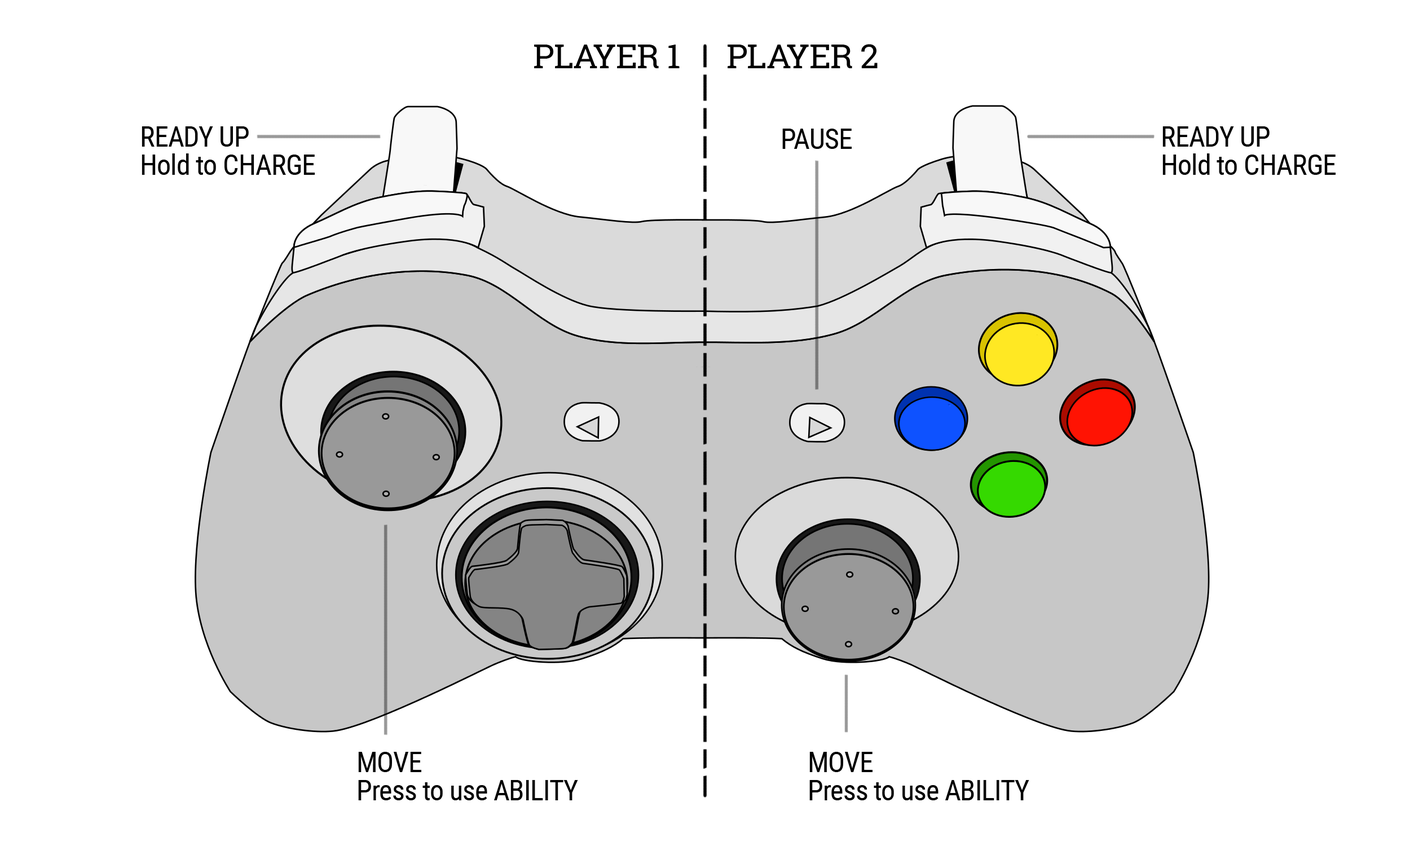
<style>
.page{position:relative;width:1410px;height:846px;background:#ffffff}
.page>*{position:absolute;margin:0}
.t1{font:33.8px "RobotoSlab-Regular";letter-spacing:-0.02em;color:#000000}
.t2{font:28px/28.7px "RobotoCondensed-Regular";letter-spacing:-0.02em;color:#000000}
.t3{font:28.2px "RobotoCondensed-Regular";letter-spacing:-0.02em;color:#000000}
</style>
<div class="page">
<p class="t1" style="left:534px;top:44px;width:343px;height:24px">PLAYER 1      PLAYER 2</p>
<p class="t2" style="left:142px;top:126px;width:173px;height:49px">READY UP<br>Hold to CHARGE</p>
<p class="t3" style="left:782px;top:129px;width:69px;height:20px">PAUSE</p>
<p class="t2" style="left:1162px;top:126px;width:173px;height:49px">READY UP<br>Hold to CHARGE</p>
<p class="t3" style="left:358px;top:752px;width:63px;height:20px">MOVE</p>
<p class="t3" style="left:809px;top:752px;width:63px;height:20px">MOVE</p>
<p class="t3" style="left:358px;top:780px;width:220px;height:20px">Press to use ABILITY</p>
<p class="t3" style="left:809px;top:780px;width:220px;height:20px">Press to use ABILITY</p>
</div>
